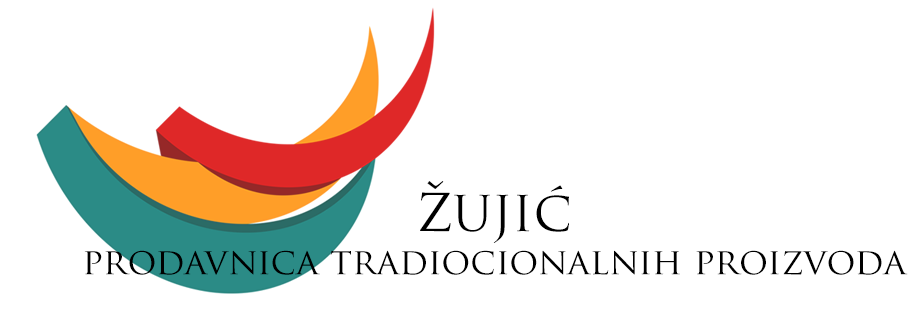
<style>
.page{position:relative;width:924px;height:318px;background:#ffffff}
.page>*{position:absolute;margin:0}
.t1{font:36px "TrajanPro-Regular";color:#000000}
.t2{font:60px "TrajanPro-Regular";color:#000000}
.t3{font:48px "TrajanPro-Regular";color:#000000}
.t4{font:55px "TrajanPro-Regular";color:#000000}
</style>
<div class="page">
<p class="t1" style="left:84px;top:181px;width:824px;height:94px;text-align:center"><span class="t2">ž</span><span class="t3">UJI</span><span class="t4">ć<br></span>prodavnica tradiocionalnih proizvoda</p>
</div>
